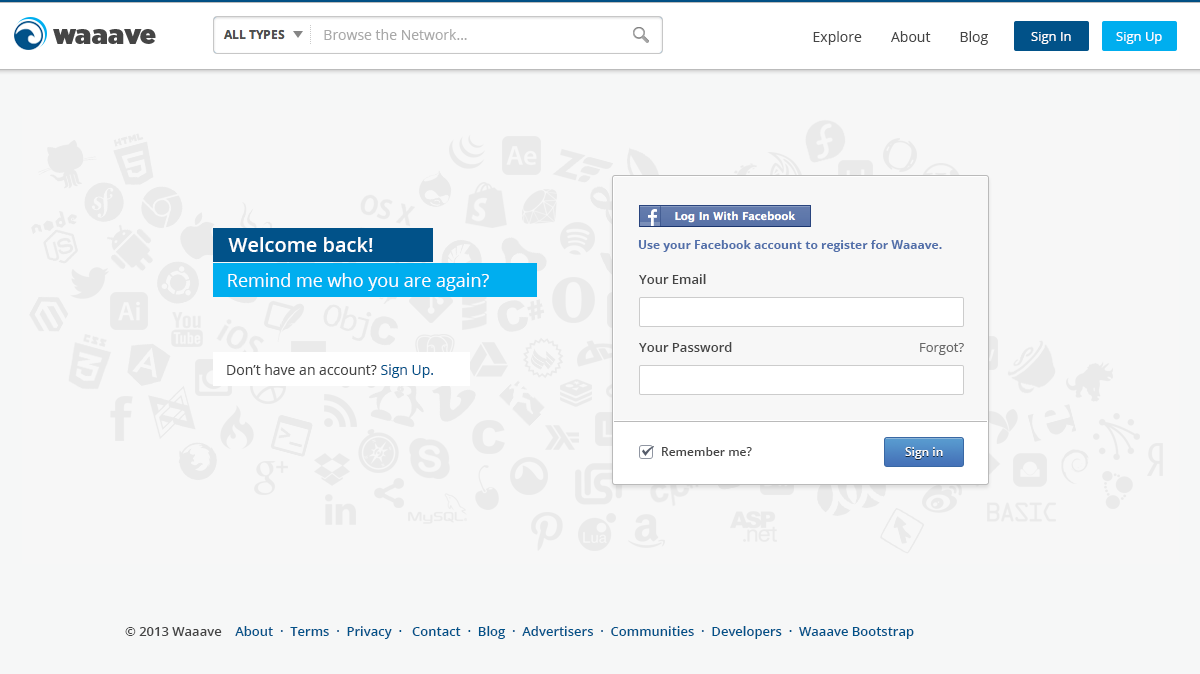
<style>
.page{position:relative;width:1200px;height:674px;background:#f7f7f7}
.page>*{position:absolute;margin:0}
.t1{font:14px "OpenSans";color:#a9a9a9}
.t2{font:14px "OpenSans";color:#454545}
.t3{font:13px "OpenSans";color:#ffffff}
.t4{font:20px "OpenSans-Semibold";color:#fefefe}
.t5{font:12px "OpenSans-Bold";color:#516faa}
.t6{font:18px "OpenSans";color:#fefefe}
.t7{font:13px "OpenSans-Semibold";color:#454545}
.t8{font:13px "OpenSans";color:#676767}
.t9{font:14px "OpenSans";color:#015289}
.t10{font:12px "OpenSans-Semibold";color:#454545}
.t11{font:12px "OpenSans-Semibold";color:#ffffff}
.t12{font:13px "OpenSans-Semibold";color:#015289}
</style>
<div class="page">
<p class="t1" style="left:324px;top:29px;width:143px;height:11px">Browse the Network...</p>
<p class="t2" style="left:813px;top:31px;width:175px;height:14px">Explore        About        Blog</p>
<p class="t3" style="left:1031px;top:32px;width:40px;height:12px">Sign In</p>
<p class="t3" style="left:1116px;top:32px;width:46px;height:12px">Sign Up</p>
<p class="t4" style="left:228px;top:237px;width:145px;height:15px">Welcome back!</p>
<p class="t5" style="left:638px;top:240px;width:304px;height:12px">Use your Facebook account to register for Waaave.</p>
<p class="t6" style="left:228px;top:273px;width:261px;height:18px">Remind me who you are again?</p>
<p class="t7" style="left:639px;top:274px;width:67px;height:10px">Your Email</p>
<p class="t7" style="left:639px;top:342px;width:93px;height:10px">Your Password</p>
<p class="t8" style="left:920px;top:343px;width:44px;height:12px">Forgot?</p>
<p class="t2" style="left:227px;top:364px;width:206px;height:14px">Don’t have an account? <span class="t9">Sign Up.</span></p>
<p class="t10" style="left:662px;top:447px;width:90px;height:9px">Remember me?</p>
<p class="t11" style="left:905px;top:447px;width:38px;height:12px">Sign in</p>
<p class="t12" style="left:125px;top:626px;width:789px;height:13px"><span class="t7">© 2013 Waaave</span>    About  ·  Terms  ·  Privacy  ·   Contact  ·  Blog  ·  Advertisers  ·  Communities  ·  Developers  ·  Waaave Bootstrap</p>
</div>
